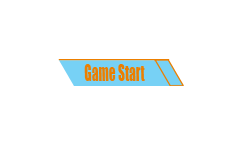
<style>
.page{position:relative;width:243px;height:145px;background:#ffffff}
.page>*{position:absolute;margin:0}
.t1{font:20.8px "Impact";color:#ec7f00;scale:0.64 1}
</style>
<div class="page">
<p class="t1" style="left:84px;top:64px;width:61px;height:17px">Game Start</p>
</div>
